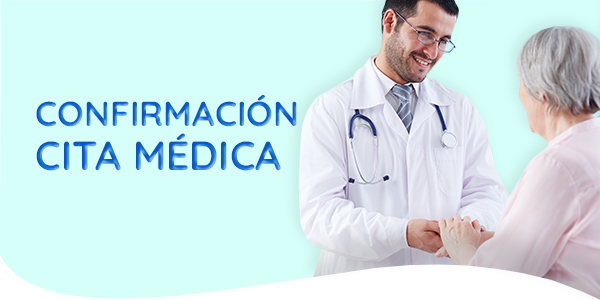
<style>
.page{position:relative;width:600px;height:300px;background:#d6fffa}
.page>*{position:absolute;margin:0}
.t1{font:34.6px "Quicksand-Bold"}
.t2{font:40.6px "Quicksand-Bold"}
</style>
<div class="page">
<p class="t1" style="left:36px;top:94px;width:261px;height:33px">CONFIRMACIÓN</p>
<p class="t2" style="left:36px;top:133px;width:245px;height:38px">CITA MÉDICA</p>
</div>
